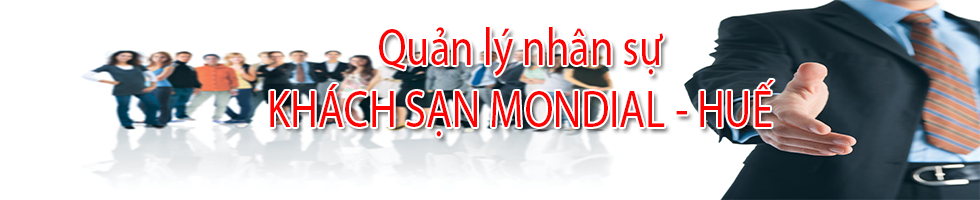
<style>
.page{position:relative;width:980px;height:200px;background:#ffffff}
.page>*{position:absolute;margin:0}
.t1{font:52.3px "MyriadPro-Regular";color:#fd0202;scale:0.81 1}
</style>
<div class="page">
<p class="t1" style="left:270px;top:27px;width:504px;height:110px;text-align:center">Quản lý nhân sự<br>KHÁCH SẠN MONDIAL - HUẾ</p>
</div>
